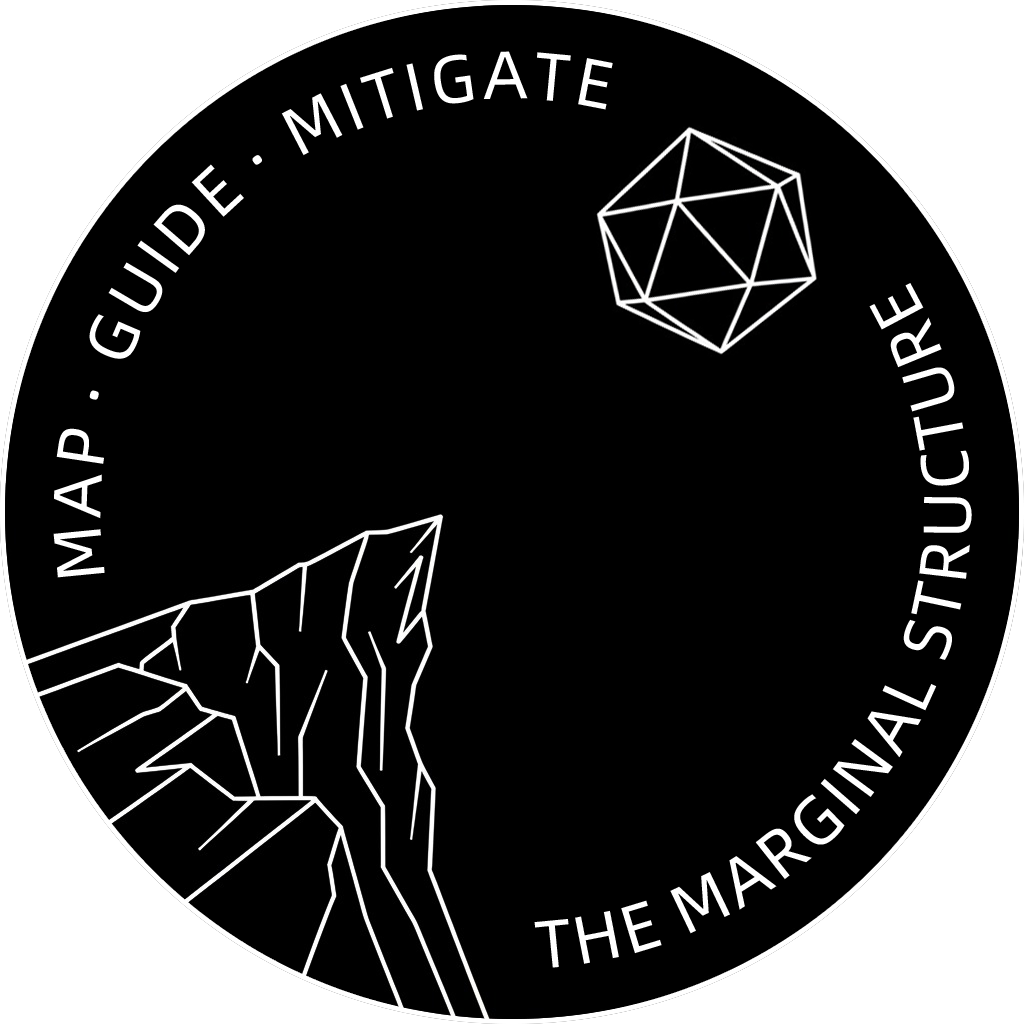
<style>
.page{position:relative;width:1024px;height:1024px;background:#000000}
.page>*{position:absolute;margin:0}
.t1{font:67.7px "AlibabaPuHuiTi_3_55_Regular";color:#ffffff;text-transform:uppercase}
</style>
<div class="page">
<p class="t1" style="left:53px;top:51px;width:560px;height:527px;rotate:-168deg">Map · Guide · Mitigate</p>
<p class="t1" style="left:534px;top:283px;width:438px;height:685px;rotate:-5deg">The Marginal Structure</p>
</div>
